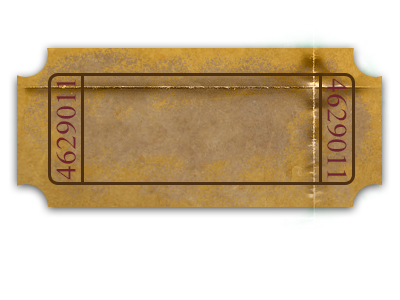
<style>
.page{position:relative;width:400px;height:300px;background:#ffffff}
.page>*{position:absolute;margin:0}
.t1{font:6.8px "TimesNewRomanPSMT";color:#6e2430;scale:1.06 1}
</style>
<div class="page">
<p class="t1" style="left:327px;top:78px;width:20px;height:101px;rotate:90deg">46290114629011</p>
<p class="t1" style="left:56px;top:79px;width:20px;height:101px;rotate:-90deg">46290114629011</p>
</div>
